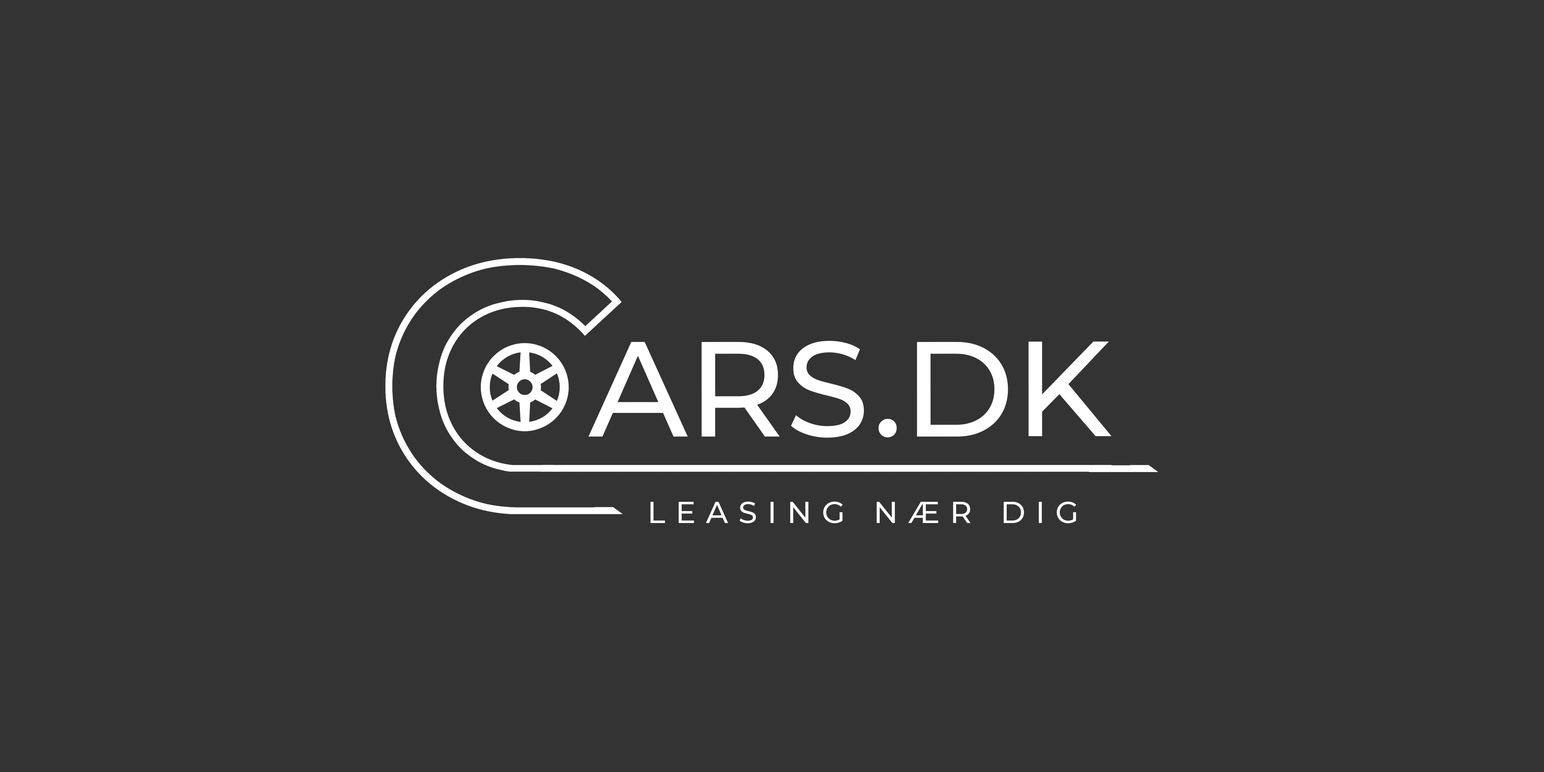
<style>
.page{position:relative;width:1544px;height:772px;background:#333333}
.page>*{position:absolute;margin:0}
.t1{font:135.1px "Montserrat-Medium";color:#ffffff}
.t2{font:30.2px "Montserrat-Medium";letter-spacing:0.34em;color:#ffffff}
</style>
<div class="page">
<p class="t1" style="left:588px;top:341px;width:524px;height:97px">ARS.DK</p>
<p class="t2" style="left:651px;top:502px;width:425px;height:22px">LEASING NÆR DIG</p>
</div>
